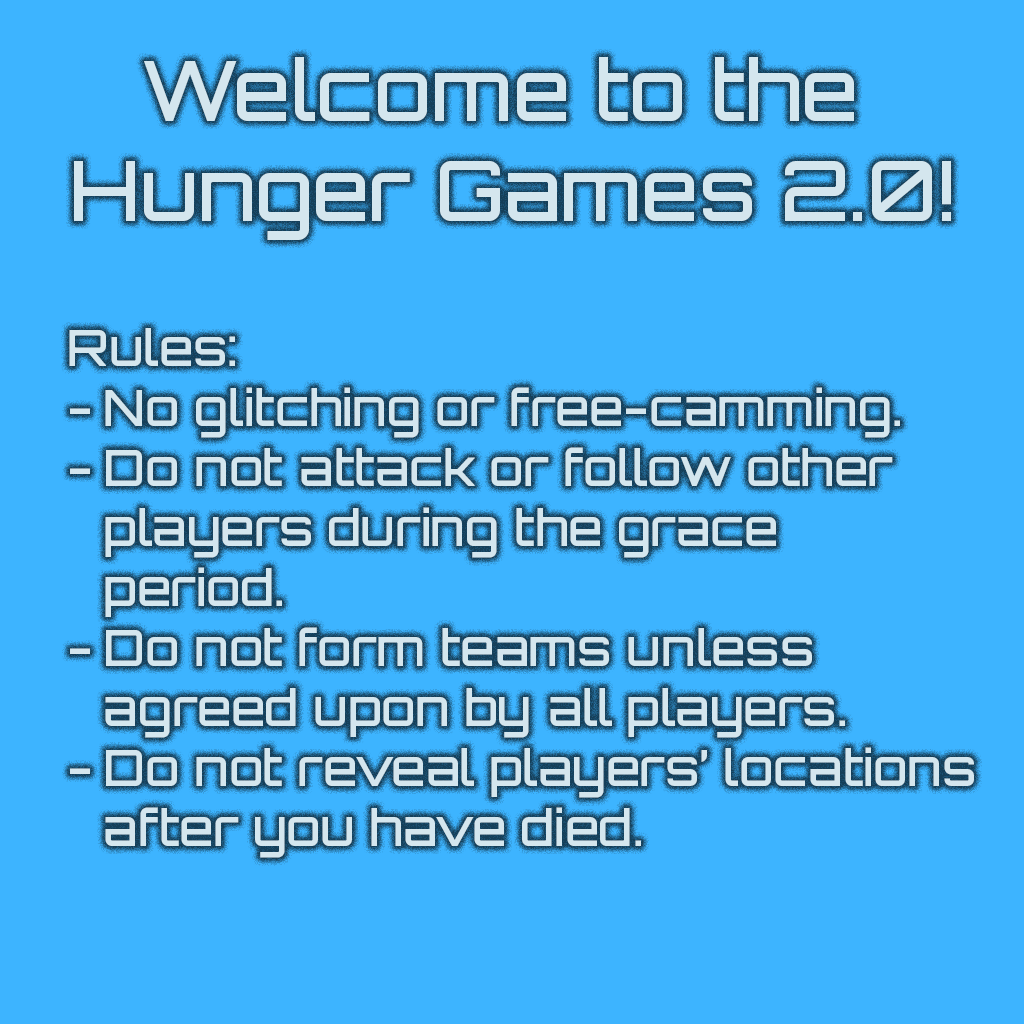
<style>
.page{position:relative;width:1024px;height:1024px;background:#3db4ff}
.page>*{position:absolute;margin:0}
.t1{font:83.3px "Orbitron-Medium";color:#d4e6ee}
.t2{font:50px "Orbitron-Medium";color:#d4e6ee}
</style>
<div class="page">
<p class="t1" style="left:74px;top:57px;width:877px;height:183px;text-align:center">Welcome to the <br>Hunger Games 2.0!</p>
<p class="t2" style="left:69px;top:328px;width:905px;height:530px">Rules:<br>- No glitching or free-camming.<br>- Do not attack or follow other<br> players during the grace <br> period.<br>- Do not form teams unless <br> agreed upon by all players.<br>- Do not reveal players’ locations<br> after you have died.</p>
</div>
